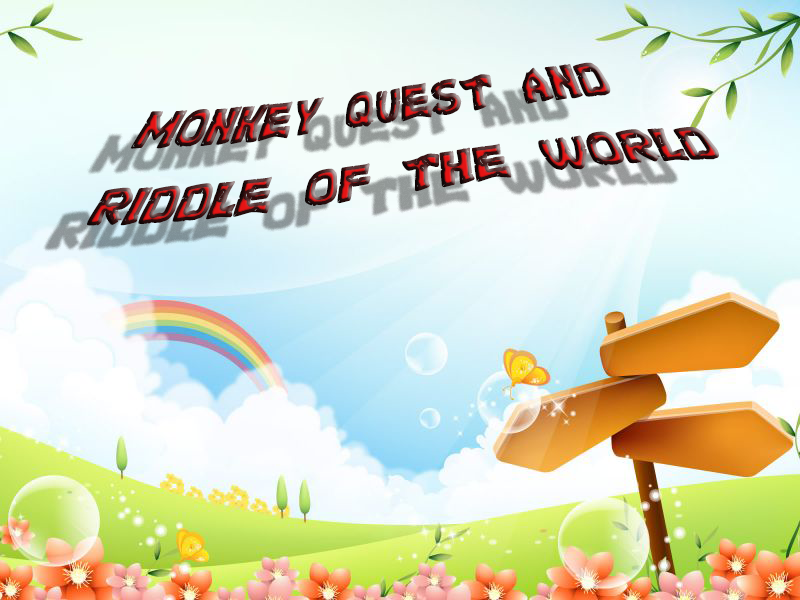
<style>
.page{position:relative;width:800px;height:600px}
.page>*{position:absolute;margin:0}
.t1{font:60px "Turtles"}
</style>
<div class="page">
<p class="t1" style="left:87px;top:62px;width:632px;height:164px">monkey quest and<br>riddle of the world</p>
</div>
